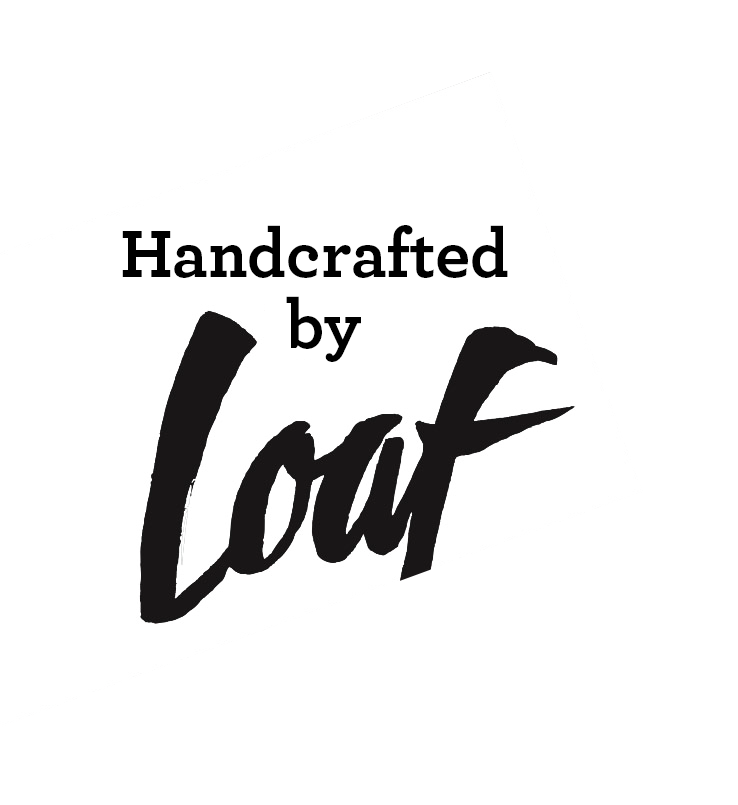
<style>
.page{position:relative;width:738px;height:805px;background:#ffffff}
.page>*{position:absolute;margin:0}
.t1{font:70px "Archer-Bold";color:#000000}
</style>
<div class="page">
<p class="t1" style="left:122px;top:225px;width:386px;height:53px">Handcrafted</p>
<p class="t1" style="left:286px;top:296px;width:75px;height:66px">by</p>
</div>
